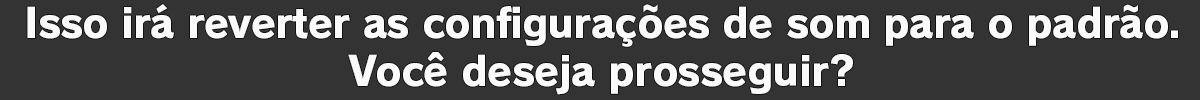
<style>
.page{position:relative;width:1200px;height:100px;background:#333333}
.page>*{position:absolute;margin:0}
.t1{font:40px "RodinPro-EB";letter-spacing:-0.019em;color:#fbfafb}
.t2{font:40px "RodinPro-EB";letter-spacing:-0.015em;color:#fbfafb}
</style>
<div class="page">
<p class="t1" style="left:27px;top:4px;width:1151px;height:43px">Isso irá reverter as configurações de som para o padrão.</p>
<p class="t2" style="left:348px;top:52px;width:505px;height:43px">Você deseja prosseguir?</p>
</div>
